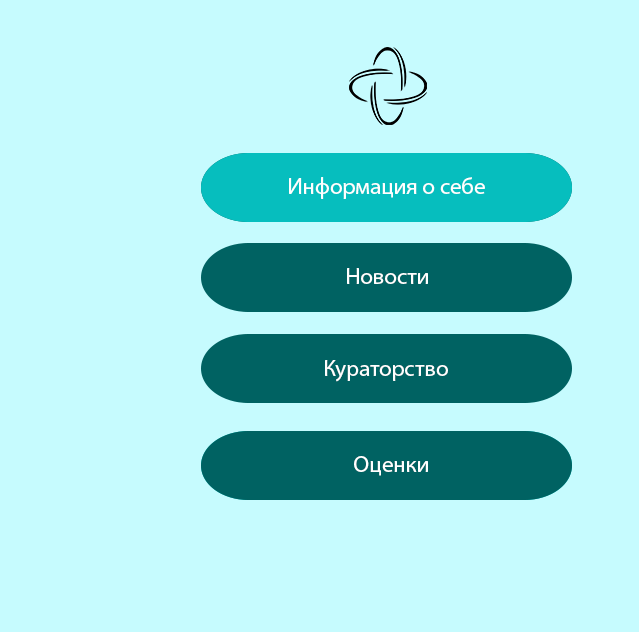
<style>
.page{position:relative;width:639px;height:632px;background:#c6fbfe}
.page>*{position:absolute;margin:0}
.t1{font:22.9px "MyriadPro-Regular";letter-spacing:-0.005em;color:#ffffff}
</style>
<div class="page">
<p class="t1" style="left:289px;top:177px;width:196px;height:22px">Информация о себе</p>
<p class="t1" style="left:347px;top:268px;width:81px;height:16px">Новости</p>
<p class="t1" style="left:325px;top:360px;width:123px;height:22px">Кураторство</p>
<p class="t1" style="left:354px;top:456px;width:74px;height:20px">Оценки</p>
</div>
